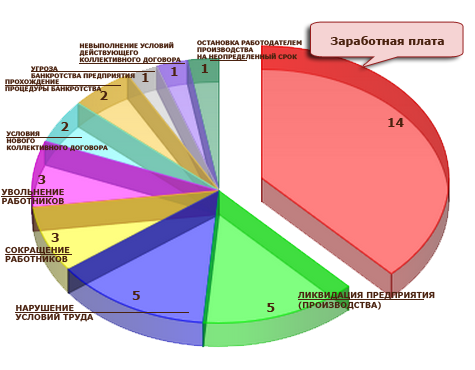
<style>
.page{position:relative;width:475px;height:370px;background:#ffffff}
.page>*{position:absolute;margin:0}
.t1{font:6px "Verdana-Bold";color:#4a220f}
.t2{font:11px "Verdana-Bold";color:#4a220f}
.t3{font:12px "Verdana-Bold";color:#4a220f}
.t4{font:8px "Verdana-Bold";color:#4a220f}
</style>
<div class="page">
<p class="t1" style="left:197px;top:40px;width:105px;height:21px">ОСТАНОВКА РАБОТОДАТЕЛЕМ<br>ПРОИЗВОДСТВА<br>НА НЕОПРЕДЕЛЕННЫЙ СРОК</p>
<p class="t2" style="left:330px;top:36px;width:114px;height:11px">Заработная плата</p>
<p class="t1" style="left:79px;top:42px;width:102px;height:22px">НЕВЫПОЛНЕНИЕ УСЛОВИЙ<br>ДЕЙСТВУЮЩЕГО<br>КОЛЛЕКТИВНОГО ДОГОВОРА</p>
<p class="t1" style="left:31px;top:66px;width:104px;height:14px">УГРОЗА<br>БАНКРОТСТВА ПРЕДПРИЯТИЯ</p>
<p class="t1" style="left:5px;top:79px;width:97px;height:14px">ПРОХОЖДЕНИЕ<br>ПРОЦЕДУРЫ БАНКРОТСТВА</p>
<p class="t3" style="left:388px;top:118px;width:16px;height:9px">14</p>
<p class="t1" style="left:6px;top:131px;width:102px;height:21px">УСЛОВИЯ<br>НОВОГО <br>КОЛЛЕКТИВНОГО ДОГОВОРА</p>
<p class="t4" style="left:1px;top:188px;width:63px;height:17px">УВОЛЬНЕНИЕ<br>РАБОТНИКОВ</p>
<p class="t4" style="left:5px;top:246px;width:65px;height:17px">СОКРАЩЕНИЕ<br>РАБОТНИКОВ</p>
<p class="t4" style="left:297px;top:291px;width:138px;height:19px">ЛИКВИДАЦИЯ ПРЕДПРИЯТИЯ<br>(ПРОИЗВОДСТВА)</p>
<p class="t4" style="left:15px;top:304px;width:79px;height:18px">НАРУШЕНИЕ<br>УСЛОВИЙ ТРУДА</p>
</div>
